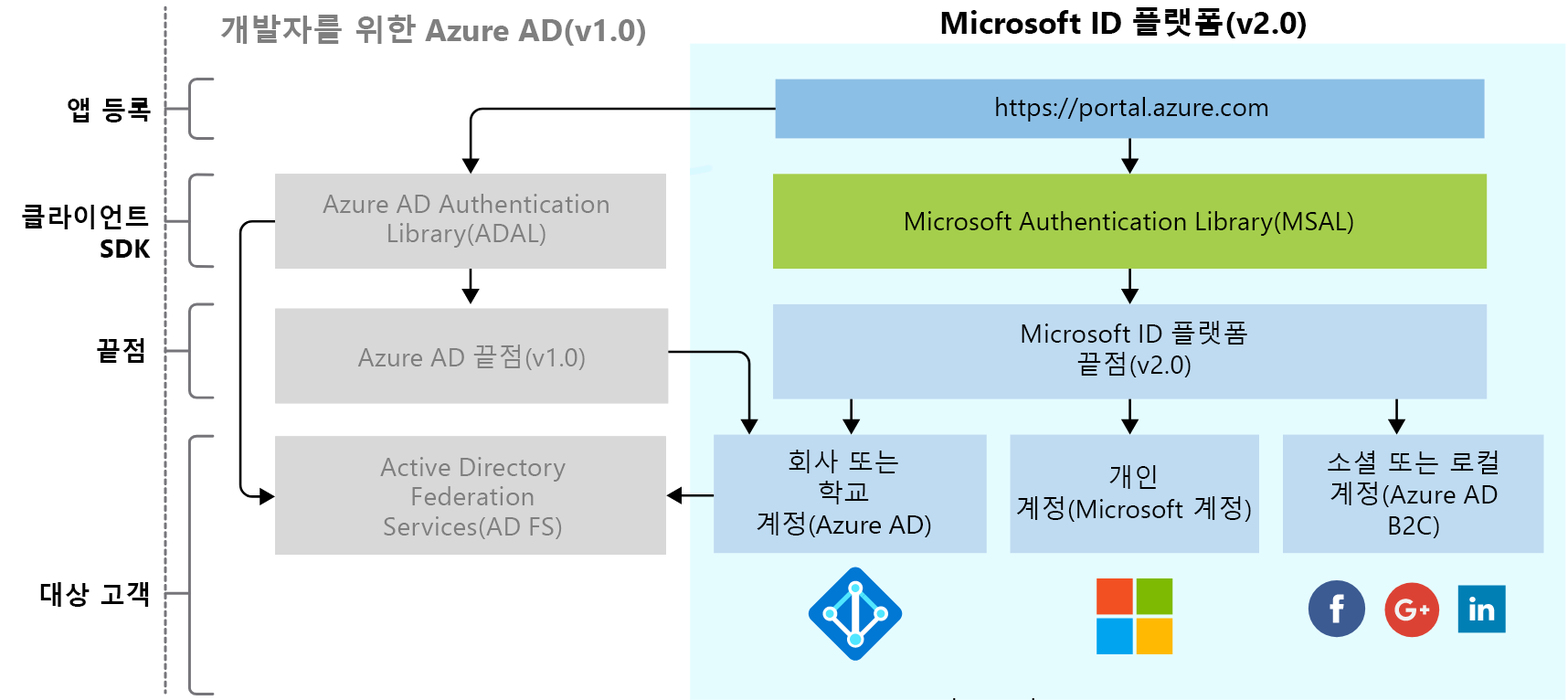
<style>
.page{position:relative;width:1568px;height:700px;background:#ffffff}
.page>*{position:absolute;margin:0}
.t1{font:31.1px "SegoeUI-Bold";color:#7f7f7f}
.t2{font:31.1px "MalgunGothicBold";color:#7f7f7f}
.t3{font:31.1px "SegoeUI-Bold";color:#000000}
.t4{font:31.1px "MalgunGothicBold";color:#000000}
.t5{font:25.7px "MalgunGothicBold";color:#000000}
.t6{font:26px "SegoeUI";color:#000000}
.t7{font:26px/29.5px "SegoeUI";color:#7f7f7f}
.t8{font:26px "MalgunGothicBold";color:#000000}
.t9{font:26px "SegoeUI-Bold";color:#000000}
.t10{font:26px/31.1px "SegoeUI";color:#000000}
.t11{font:26px/31.1px "MalgunGothic";color:#000000}
.t12{font:26px "SegoeUI";color:#7f7f7f}
.t13{font:26px "MalgunGothic";color:#7f7f7f}
</style>
<div class="page">
<p class="t1" style="left:220px;top:15px;width:425px;height:31px"><span class="t2">개발자를 위한</span> Azure AD(v1.0)</p>
<p class="t3" style="left:941px;top:7px;width:365px;height:31px">Microsoft ID <span class="t4">플랫폼</span>(v2.0)</p>
<p class="t5" style="left:68px;top:98px;width:83px;height:24px">앱 등록</p>
<p class="t6" style="left:996px;top:97px;width:272px;height:25px">https://portal.azure.com</p>
<p class="t7" style="left:323px;top:194px;width:286px;height:54px;text-align:center">Azure AD Authentication Library(ADAL)</p>
<p class="t8" style="left:22px;top:205px;width:129px;height:53px;text-align:right">클라이언트<br><span class="t9">SDK</span></p>
<p class="t6" style="left:906px;top:211px;width:447px;height:25px">Microsoft Authentication Library(MSAL)</p>
<p class="t10" style="left:1022px;top:321px;width:225px;height:56px;text-align:center">Microsoft ID <span class="t11">플랫폼 끝점</span>(v2.0)</p>
<p class="t8" style="left:97px;top:338px;width:47px;height:25px">끝점</p>
<p class="t12" style="left:357px;top:344px;width:228px;height:26px">Azure AD <span class="t13">끝점</span>(v1.0)</p>
<p class="t11" style="left:757px;top:450px;width:174px;height:87px;text-align:center">회사 또는 <br>학교 계정<span class="t10">(Azure AD)</span></p>
<p class="t7" style="left:380px;top:457px;width:186px;height:82px;text-align:center">Active Directory Federation Services(AD FS)</p>
<p class="t10" style="left:1328px;top:450px;width:170px;height:88px;text-align:center"><span class="t11">소셜 또는 로컬 계정</span>(Azure AD B2C)</p>
<p class="t10" style="left:1017px;top:465px;width:234px;height:57px;text-align:center"><span class="t11">개인 <br>계정</span>(Microsoft<span class="t11"> 계정</span>)</p>
<p class="t8" style="left:40px;top:582px;width:109px;height:25px">대상 고객</p>
</div>
